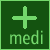
<style>
.page{position:relative;width:50px;height:50px;background:#145310}
.page>*{position:absolute;margin:0}
.t1{font:18.4px "Humnst777CnEU-Normal";color:#73d76b}
</style>
<div class="page">
<p class="t1" style="left:10px;top:30px;width:33px;height:15px">medi</p>
</div>
